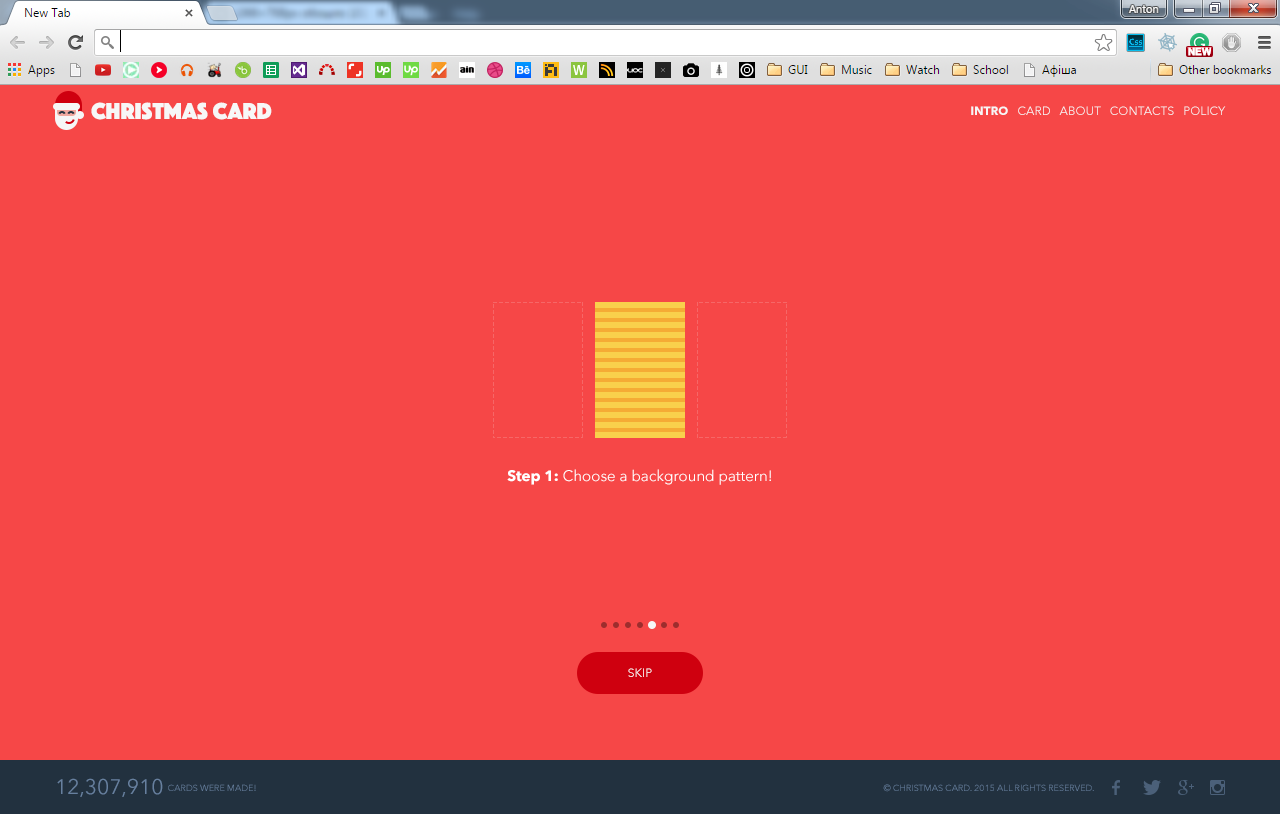
<style>
.page{position:relative;width:1280px;height:814px;background:#f64747}
.page>*{position:absolute;margin:0}
.t1{font:24px "Phosphate-Solid";color:#f7f7f7}
.t2{font:12px "AvenirNext-Regular";color:#f6f6f6;text-transform:uppercase}
.t3{font:12px "AvenirNext-Bold";color:#f6f6f6;text-transform:uppercase}
.t4{font:15px "AvenirNext-Regular";color:#ffffff}
.t5{font:15px "AvenirNext-Bold";color:#ffffff}
.t6{font:12px "AvenirNext-Regular";text-transform:uppercase}
.t7{font:9px "AvenirNext-Regular";color:#67809f;text-transform:uppercase}
.t8{font:21px "AvenirNext-Regular";color:#67809f;text-transform:uppercase}
</style>
<div class="page">
<p class="t1" style="left:91px;top:102px;width:181px;height:18px">Christmas Card</p>
<p class="t2" style="left:971px;top:106px;width:255px;height:9px"><span class="t3">intro</span>   card   about   contacts   Policy</p>
<p class="t4" style="left:507px;top:469px;width:264px;height:16px"><span class="t5">Step 1:</span> Choose a background pattern!</p>
<p class="t6" style="left:628px;top:668px;width:24px;height:9px">Skip</p>
<p class="t7" style="left:57px;top:778px;width:199px;height:19px"><span class="t8">12,307,910  </span>cards were made!</p>
<p class="t7" style="left:883px;top:784px;width:211px;height:8px">© Christmas card. 2015 All rights reserved.</p>
</div>
